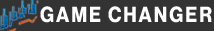
<style>
.page{position:relative;width:214px;height:31px;background:#333333}
.page>*{position:absolute;margin:0}
.t1{font:21.4px "NeueHaasDisplay-Bold";letter-spacing:0.1em;color:#ffffff;scale:0.89 1}
</style>
<div class="page">
<p class="t1" style="left:40px;top:6px;width:172px;height:17px">GAME CHANGER</p>
</div>
